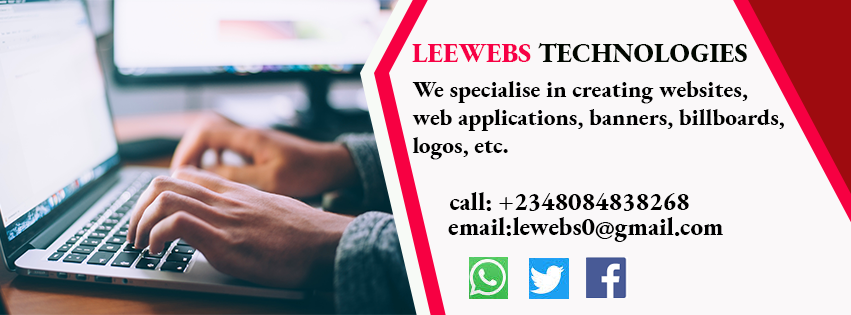
<style>
.page{position:relative;width:851px;height:315px;background:#faf8f9}
.page>*{position:absolute;margin:0}
.t1{font:26.6px "EBGaramond-ExtraBold";color:#010700}
.t2{font:26.6px "EBGaramond-ExtraBold";color:#f70046}
.t3{font:23.3px "EBGaramond-ExtraBold";color:#000000}
.t4{font:25px "EBGaramond-ExtraBold";color:#000000}
.t5{font:40.1px "EBGaramond-ExtraBold";color:#000000}
</style>
<div class="page">
<p class="t1" style="left:412px;top:43px;width:335px;height:19px"><span class="t2">LEEWEBS </span>TECHNOLOGIES</p>
<p class="t3" style="left:412px;top:81px;width:372px;height:79px">We specialise in creating websites, <br>web applications, banners, billboards,<br>logos, etc.</p>
<p class="t4" style="left:450px;top:192px;width:239px;height:19px">call: +2348084838268</p>
<p class="t4" style="left:448px;top:217px;width:275px;height:25px"><span class="t5"><br></span>email:lewebs0@gmail.com</p>
</div>
